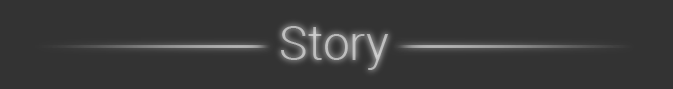
<style>
.page{position:relative;width:673px;height:89px;background:#333333}
.page>*{position:absolute;margin:0}
.t1{font:48px "Roboto-Light";color:#bfbfbf}
</style>
<div class="page">
<p class="t1" style="left:281px;top:26px;width:108px;height:44px">Story</p>
</div>
